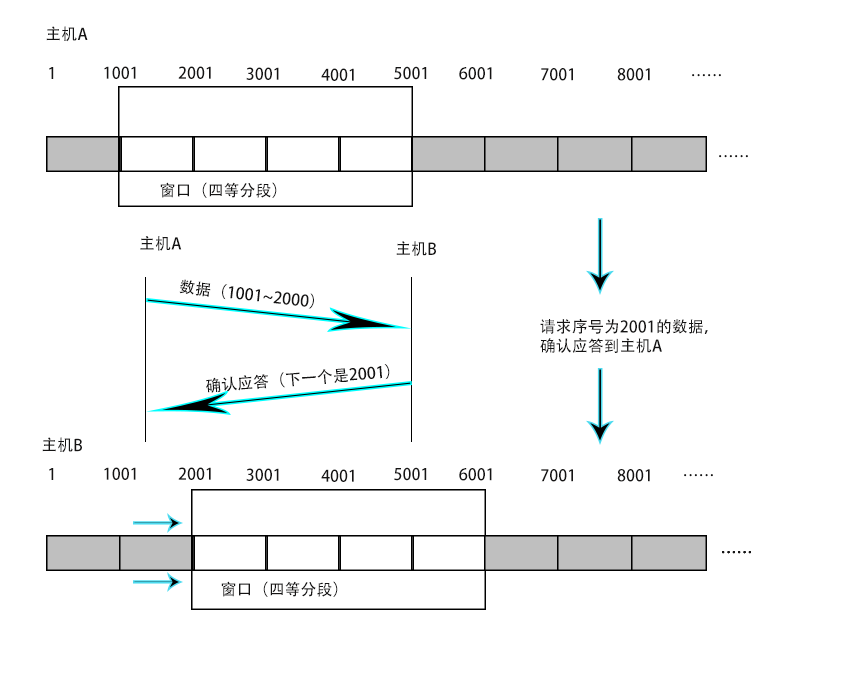
<style>
.page{position:relative;width:852px;height:676px;background:#ffffff}
.page>*{position:absolute;margin:0}
.t1{font:16px "AdobeHeitiStd-Regular";color:#151414}
</style>
<div class="page">
<p class="t1" style="left:46px;top:26px;width:42px;height:16px">主机A</p>
<p class="t1" style="left:49px;top:67px;width:5px;height:12px">1</p>
<p class="t1" style="left:104px;top:66px;width:32px;height:13px">1001</p>
<p class="t1" style="left:178px;top:66px;width:33px;height:13px">2001</p>
<p class="t1" style="left:246px;top:67px;width:33px;height:13px">3001</p>
<p class="t1" style="left:321px;top:68px;width:33px;height:13px">4001</p>
<p class="t1" style="left:394px;top:66px;width:33px;height:14px">5001</p>
<p class="t1" style="left:459px;top:67px;width:33px;height:13px">6001</p>
<p class="t1" style="left:541px;top:68px;width:32px;height:13px">7001</p>
<p class="t1" style="left:617px;top:68px;width:33px;height:13px">8001</p>
<p class="t1" style="left:692px;top:74px;width:29px;height:3px">……</p>
<p class="t1" style="left:719px;top:155px;width:29px;height:3px">……</p>
<p class="t1" style="left:160px;top:182px;width:117px;height:16px">窗口（四等分段）</p>
<p class="t1" style="left:140px;top:236px;width:42px;height:15px">主机A</p>
<p class="t1" style="left:396px;top:241px;width:40px;height:15px">主机B</p>
<p class="t1" style="left:179px;top:279px;width:135px;height:30px;rotate:6deg">数据（1001~2000）</p>
<p class="t1" style="left:540px;top:319px;width:168px;height:34px">请求序号为2001的数据，<br>确认应答到主机A</p>
<p class="t1" style="left:206px;top:364px;width:184px;height:29px;rotate:-5deg">确认应答（下一个是2001）</p>
<p class="t1" style="left:42px;top:437px;width:40px;height:16px">主机B</p>
<p class="t1" style="left:49px;top:468px;width:5px;height:12px">1</p>
<p class="t1" style="left:104px;top:467px;width:32px;height:13px">1001</p>
<p class="t1" style="left:178px;top:467px;width:33px;height:13px">2001</p>
<p class="t1" style="left:246px;top:468px;width:33px;height:13px">3001</p>
<p class="t1" style="left:321px;top:469px;width:33px;height:13px">4001</p>
<p class="t1" style="left:394px;top:467px;width:33px;height:14px">5001</p>
<p class="t1" style="left:459px;top:468px;width:33px;height:13px">6001</p>
<p class="t1" style="left:541px;top:469px;width:32px;height:13px">7001</p>
<p class="t1" style="left:617px;top:469px;width:33px;height:13px">8001</p>
<p class="t1" style="left:684px;top:474px;width:29px;height:3px">……</p>
<p class="t1" style="left:722px;top:551px;width:29px;height:3px">……</p>
<p class="t1" style="left:722px;top:551px;width:29px;height:3px">……</p>
<p class="t1" style="left:722px;top:551px;width:29px;height:3px">……</p>
<p class="t1" style="left:722px;top:551px;width:29px;height:3px">……</p>
<p class="t1" style="left:221px;top:581px;width:117px;height:16px">窗口（四等分段）</p>
</div>
